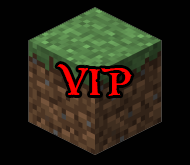
<style>
.page{position:relative;width:190px;height:165px;background:#010101}
.page>*{position:absolute;margin:0}
.t1{font:40px "PiecesofEight";color:#ff0000}
</style>
<div class="page">
<p class="t1" style="left:57px;top:64px;width:75px;height:32px">VIP</p>
</div>
